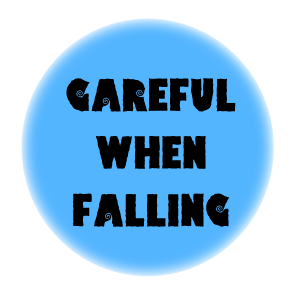
<style>
.page{position:relative;width:300px;height:300px;background:#ffffff}
.page>*{position:absolute;margin:0}
.t1{font:48px "HippoCritic";color:#000000}
</style>
<div class="page">
<p class="t1" style="left:66px;top:78px;width:170px;height:149px;text-align:center">GAREFUL<br>WHEN<br>FALLING</p>
</div>
